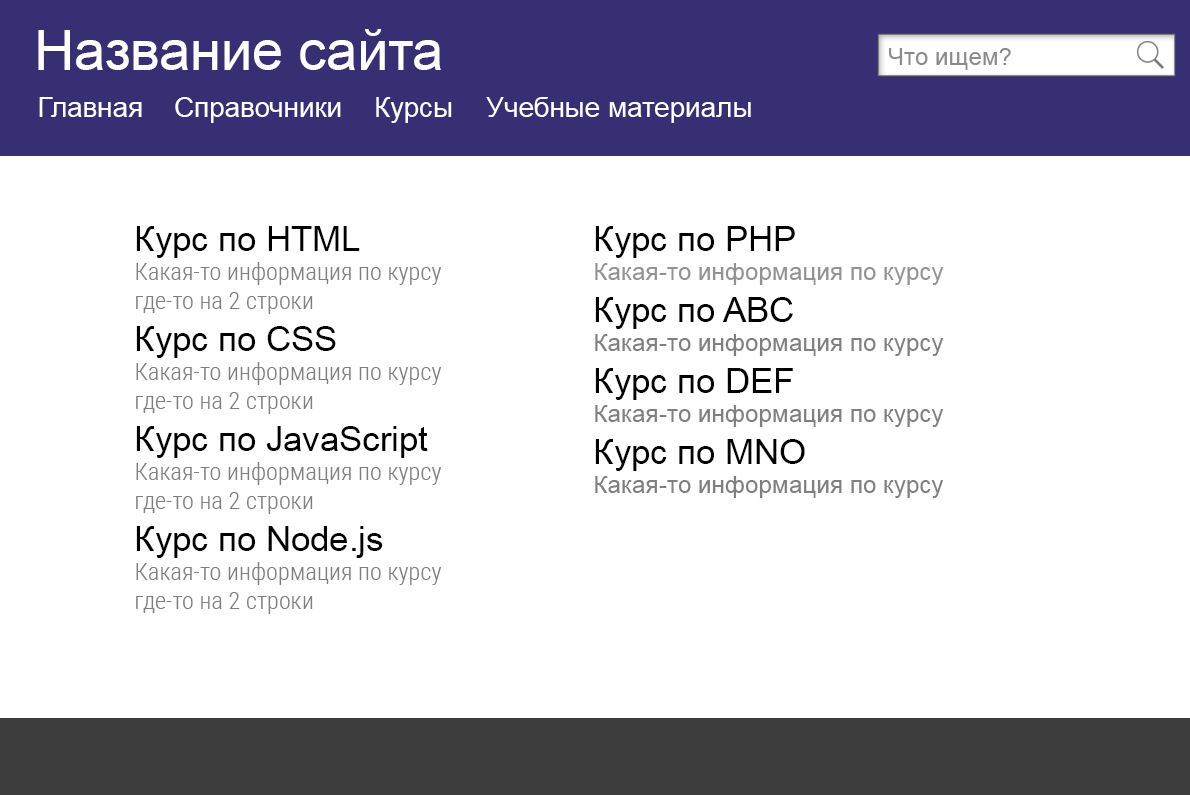
<style>
.page{position:relative;width:1190px;height:795px;background:#ffffff}
.page>*{position:absolute;margin:0}
.t1{font:55.6px "ArialMT";color:#ffffff}
.t2{font:24.3px "ArialMT";color:#8b8b8b}
.t3{font:27.8px "ArialMT";color:#ffffff}
.t4{font:24.3px "RobotoCondensed-Light";color:#7f7f7f}
.t5{font:34.7px "ArialMT";color:#000000}
.t6{font:24.3px "ArialMT";color:#949393}
.t7{font:24.3px "ArialMT";color:#7f7f7f}
</style>
<div class="page">
<p class="t1" style="left:38px;top:29px;width:403px;height:41px">Название сайта</p>
<p class="t2" style="left:888px;top:48px;width:123px;height:22px">Что ищем?</p>
<p class="t3" style="left:39px;top:97px;width:103px;height:20px">Главная</p>
<p class="t3" style="left:175px;top:97px;width:166px;height:26px">Справочники</p>
<p class="t3" style="left:376px;top:97px;width:76px;height:26px">Курсы</p>
<p class="t3" style="left:486px;top:97px;width:265px;height:26px">Учебные материалы</p>
<p class="t4" style="left:136px;top:226px;width:306px;height:388px"><span class="t5">Курс по HTML<br></span>Какая-то информация по курсу<br>где-то на 2 строки<br><span class="t5">Курс по CSS<br></span>Какая-то информация по курсу<br>где-то на 2 строки<br><span class="t5">Курс по JavaScript<br></span>Какая-то информация по курсу<br>где-то на 2 строки<br><span class="t5">Курс по Node.js<br></span>Какая-то информация по курсу<br>где-то на 2 строки</p>
<p class="t6" style="left:595px;top:226px;width:348px;height:272px"><span class="t5">Курс по PHP<br></span>Какая-то информация по курсу<br><span class="t5">Курс по ABC<br></span><span class="t7">Какая-то информация по курсу<br></span><span class="t5">Курс по DEF<br></span><span class="t7">Какая-то информация по курсу<br></span><span class="t5">Курс по MNO<br></span><span class="t7">Какая-то информация по курсу</span></p>
</div>
